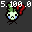
<style>
.page{position:relative;width:32px;height:32px;background:#333333}
.page>*{position:absolute;margin:0}
.t1{font:9px "Consolas";letter-spacing:-0.038em;color:#ffffff}
</style>
<div class="page">
<p class="t1" style="left:1px;top:1px;width:30px;height:6px">5.100.0</p>
</div>
